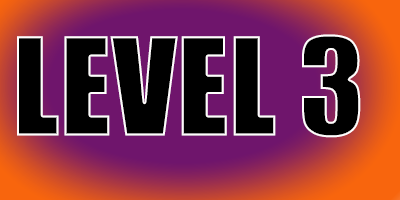
<style>
.page{position:relative;width:400px;height:200px;background:#000000}
.page>*{position:absolute;margin:0}
.t1{font:125px "Impact";color:#000000}
</style>
<div class="page">
<p class="t1" style="left:17px;top:34px;width:344px;height:104px">LEVEL 3</p>
</div>
